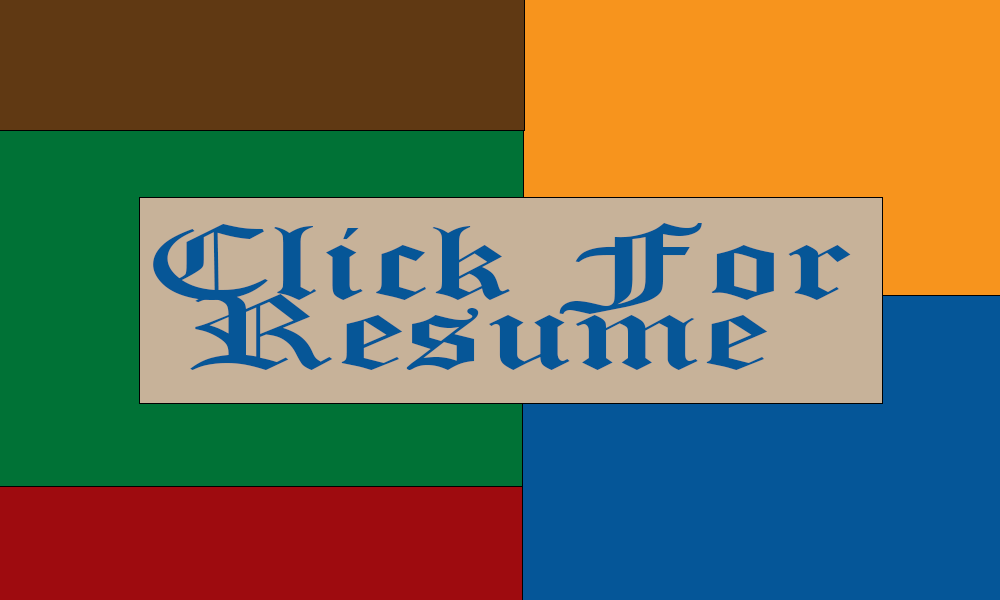
<style>
.page{position:relative;width:1000px;height:600px}
.page>*{position:absolute;margin:0}
.t1{font:105px "OldEnglishTextMT";color:#065697;scale:1.67 1}
</style>
<div class="page">
<p class="t1" style="left:153px;top:223px;width:698px;height:147px">Click For<br> Resume</p>
</div>
